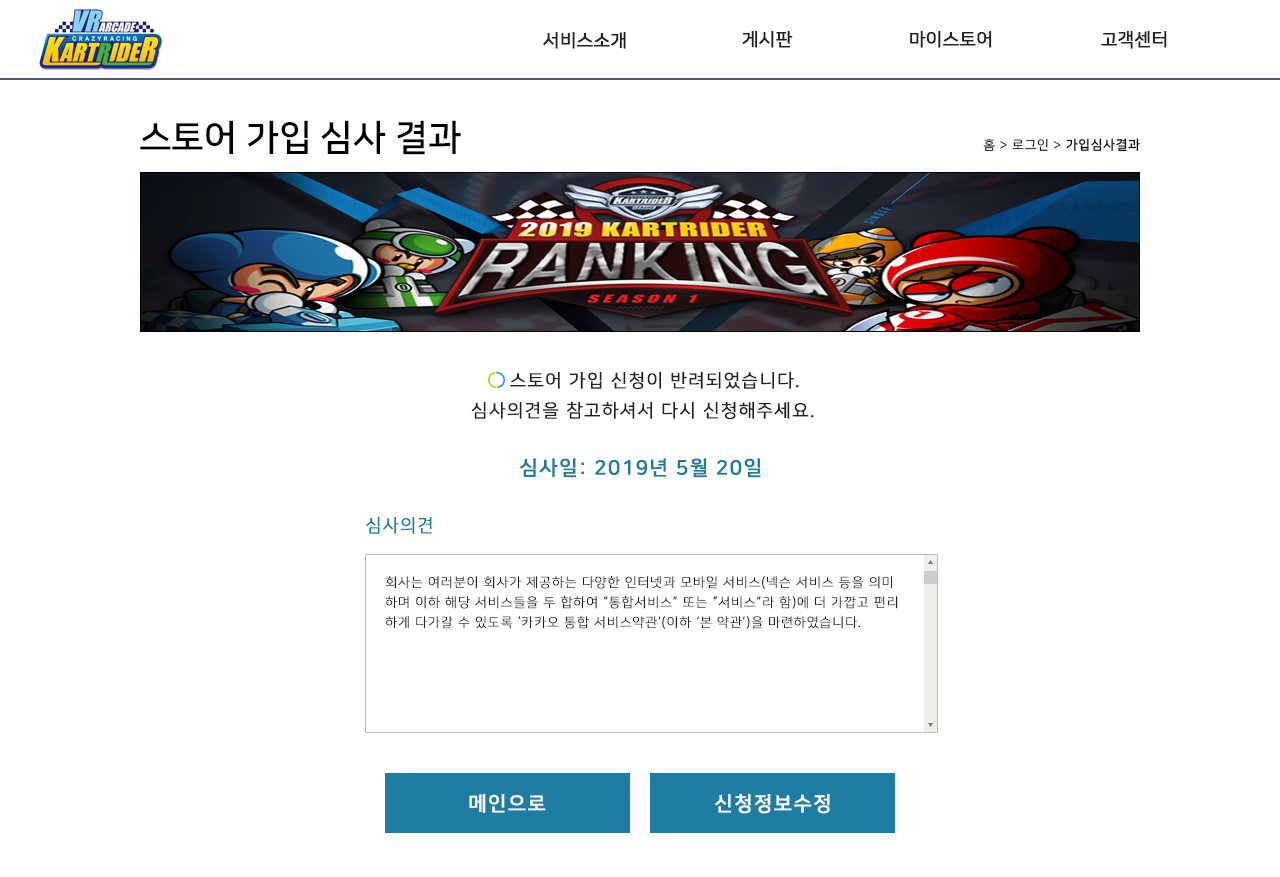
<style>
.page{position:relative;width:1280px;height:877px;background:#ffffff}
.page>*{position:absolute;margin:0}
.t1{font:18px "NanumSquareR";color:#222222;font-weight:bold}
.t2{font:36px "NanumSquareB";color:#000000}
.t3{font:13px "NanumSquareR";letter-spacing:0.05em;color:#000000}
.t4{font:13px "NanumSquareB";letter-spacing:0.05em;color:#000000}
.t5{font:18px/30px "NanumSquareR";letter-spacing:0.05em;color:#222222;text-transform:uppercase;font-weight:bold}
.t6{font:20px "NanumSquareB";letter-spacing:0.05em;color:#1d7ca2;text-transform:uppercase;font-weight:bold}
.t7{font:18px "NanumSquareR";letter-spacing:0.05em;color:#1d7ca2;text-transform:uppercase;font-weight:bold}
.t8{font:13px/20px "NanumSquareL";letter-spacing:0.05em;color:#222222;text-transform:uppercase;font-weight:bold}
.t9{font:13px/25px "NanumSquareL";letter-spacing:0.05em;color:#222222;text-transform:uppercase;font-weight:bold}
.t10{font:20px "NanumSquareB";letter-spacing:0.05em;color:#ffffff;font-weight:bold}
</style>
<div class="page">
<p class="t1" style="left:742px;top:30px;width:51px;height:18px">게시판</p>
<p class="t1" style="left:910px;top:30px;width:82px;height:18px">마이스토어</p>
<p class="t1" style="left:1101px;top:30px;width:66px;height:18px">고객센터</p>
<p class="t1" style="left:543px;top:31px;width:83px;height:18px">서비스소개</p>
<p class="t2" style="left:140px;top:120px;width:321px;height:35px">스토어 가입 심사 결과</p>
<p class="t3" style="left:983px;top:138px;width:157px;height:14px">홈 &gt; 로그인 &gt; <span class="t4">가입심사결과</span></p>
<p class="t5" style="left:471px;top:371px;width:343px;height:49px;text-align:center">스토어 가입 신청이 반려되었습니다.<br>심사의견을 참고하셔서 다시 신청해주세요.</p>
<p class="t6" style="left:520px;top:458px;width:241px;height:20px">심사일: 2019년 5월 20일</p>
<p class="t7" style="left:366px;top:517px;width:66px;height:17px">심사의견</p>
<p class="t8" style="left:385px;top:576px;width:513px;height:53px"><span class="t9">회사는 여러분이 회사가 제공하는 다양한 인터넷과 모바일 서비스(넥슨 </span>서비스 등을 의미<br>하며 이하 해당 서비스들을 두 합하여 “통합서비스” 또는 “서비스”라 함)에 더 가깝고 편리<br>하게 다가갈 수 있도록 ‘카카오 통합 서비스약관’(이하 ‘본 약관’)을 마련하였습니다.</p>
<p class="t10" style="left:469px;top:794px;width:77px;height:19px">메인으로</p>
<p class="t10" style="left:715px;top:794px;width:115px;height:20px">신청정보수정</p>
</div>
